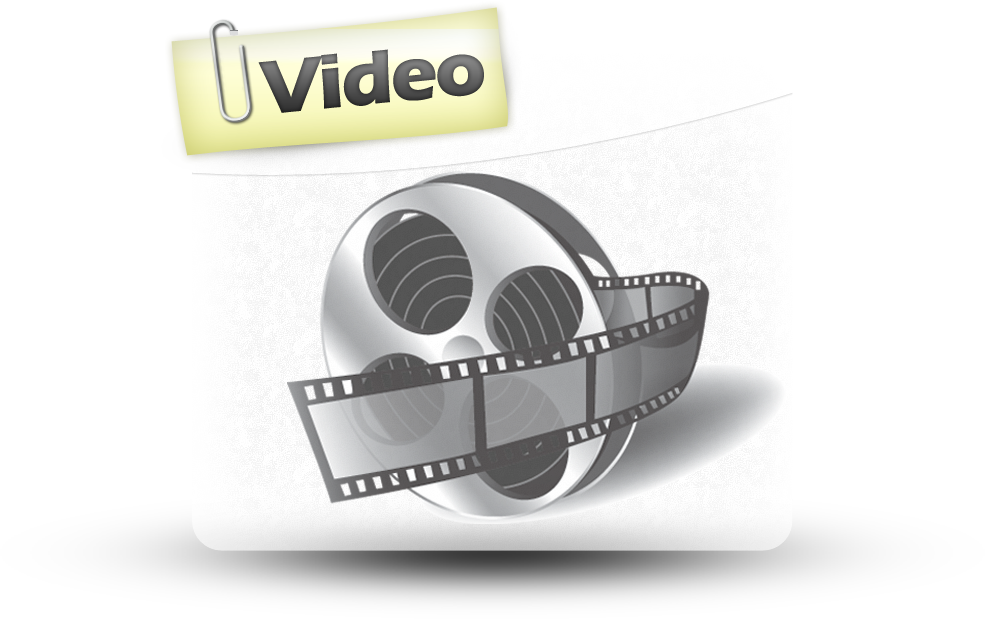
<style>
.page{position:relative;width:985px;height:619px;background:#ffffff}
.page>*{position:absolute;margin:0}
.t1{font:78px "ErasITC-Bold";letter-spacing:-0.05em;color:#4c4c4c;font-weight:bold}
</style>
<div class="page">
<p class="t1" style="left:258px;top:49px;width:226px;height:64px;rotate:-6deg">Video</p>
</div>
